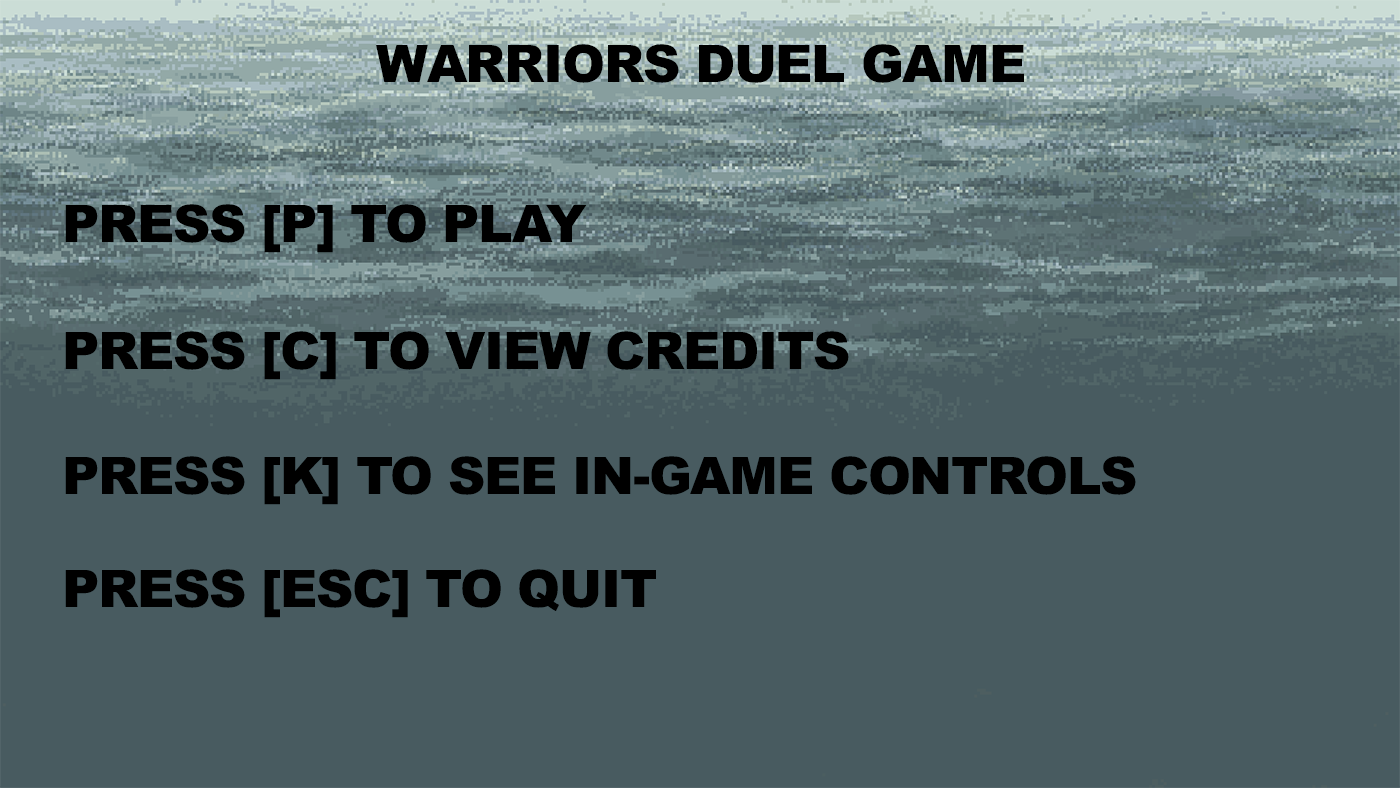
<style>
.page{position:relative;width:1400px;height:788px;background:#485b60}
.page>*{position:absolute;margin:0}
.t1{font:51.7px "Arial-Black";letter-spacing:-0.025em;color:#000000}
</style>
<div class="page">
<p class="t1" style="left:376px;top:44px;width:648px;height:39px">WARRIORS DUEL GAME</p>
<p class="t1" style="left:65px;top:204px;width:522px;height:49px">PRESS [P] TO PLAY</p>
<p class="t1" style="left:65px;top:331px;width:784px;height:49px">PRESS [C] TO VIEW CREDITS</p>
<p class="t1" style="left:65px;top:456px;width:1071px;height:49px">PRESS [K] TO SEE IN-GAME CONTROLS</p>
<p class="t1" style="left:65px;top:569px;width:591px;height:49px">PRESS [ESC] TO QUIT</p>
</div>
